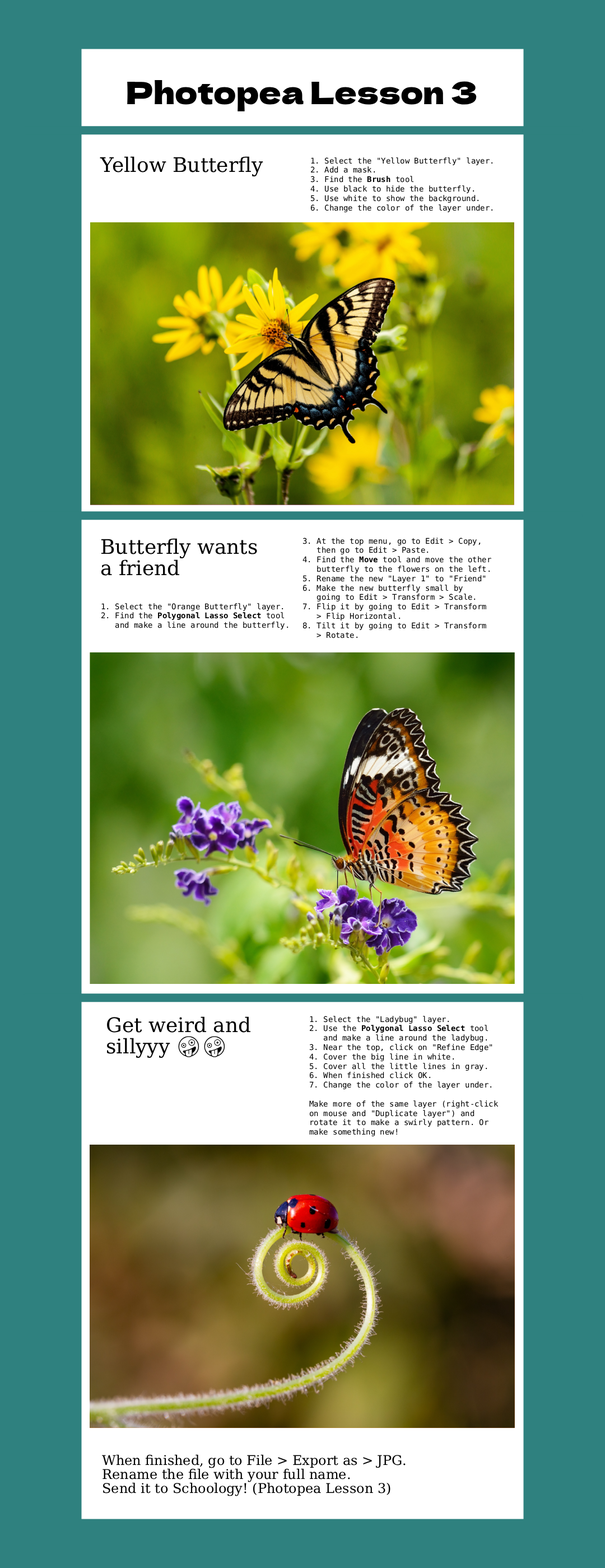
<style>
.page{position:relative;width:605px;height:1568px;background:#2f817f}
.page>*{position:absolute;margin:0}
.t1{font:30.8px "DelaGothicOne-Regular";color:#000000}
.t2{font:20.2px "DejaVuSerif";color:#000000}
.t3{font:7.8px "DejaVuSansMono";color:#000000}
.t4{font:7.8px "DejaVuSansMono-Bold";color:#000000}
.t5{font:20.2px/21.3px "DejaVuSerif";color:#000000}
.t6{font:20.2px/21.3px "NotoEmoji-Regular";color:#000000}
.t7{font:13.4px/14px "DejaVuSerif";color:#000000}
</style>
<div class="page">
<p class="t1" style="left:127px;top:80px;width:350px;height:31px">Photopea Lesson 3</p>
<p class="t2" style="left:100px;top:156px;width:163px;height:20px">Yellow Butterfly</p>
<p class="t3" style="left:310px;top:157px;width:183px;height:56px">1. Select the "Yellow Butterfly" layer.<br>2. Add a mask.<br>3. Find the <span class="t4">Brush </span>tool<br>4. Use black to hide the butterfly. <br>5. Use white to show the background.<br>6. Change the color of the layer under.</p>
<p class="t5" style="left:101px;top:538px;width:156px;height:38px">Butterfly wants<br>a friend</p>
<p class="t3" style="left:302px;top:538px;width:189px;height:100px">3. At the top menu, go to Edit &gt; Copy,<br>   then go to Edit &gt; Paste.<br>4. Find the <span class="t4">Move </span>tool and move the other<br>   butterfly to the flowers on the left.<br>5. Rename the new "Layer 1" to "Friend"<br>6. Make the new butterfly small by <br>   going to Edit &gt; Transform &gt; Scale.<br>7. Flip it by going to Edit &gt; Transform <br>   &gt; Flip Horizontal.<br>8. Tilt it by going to Edit &gt; Transform<br>   &gt; Rotate.</p>
<p class="t3" style="left:101px;top:603px;width:187px;height:26px">1. Select the "Orange Butterfly" layer.<br>2. Find the <span class="t4">Polygonal Lasso Select</span> tool<br>   and make a line around the butterfly.</p>
<p class="t5" style="left:107px;top:1016px;width:143px;height:42px">Get weird and sillyyy <span class="t6">🤪🤪</span></p>
<p class="t3" style="left:309px;top:1016px;width:189px;height:121px">1. Select the "Ladybug" layer.<br>2. Use the <span class="t4">Polygonal Lasso Select</span> tool<br>   and make a line around the ladybug.<br>3. Near the top, click on "Refine Edge"<br>4. Cover the big line in white.<br>5. Cover all the little lines in gray.<br>6. When finished click OK.<br>7. Change the color of the layer under.<br><br>Make more of the same layer (right-click on mouse and "Duplicate layer") and rotate it to make a swirly pattern. Or make something new!</p>
<p class="t7" style="left:102px;top:1454px;width:303px;height:42px">When finished, go to File &gt; Export as &gt; JPG. <br>Rename the file with your full name.<br>Send it to Schoology! (Photopea Lesson 3)</p>
</div>
